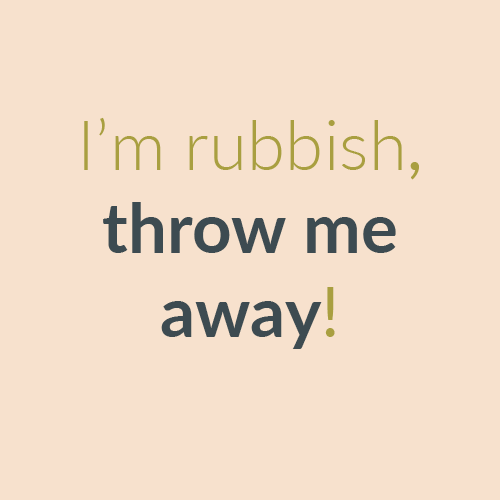
<style>
.page{position:relative;width:500px;height:500px;background:#f7e1cd}
.page>*{position:absolute;margin:0}
.t1{font:104.2px "Avenir-Black";color:#f7e2cd}
.t2{font:69.4px "Lato-Bold";color:#3d4b51}
.t3{font:69.4px "Lato-Light";color:#a9a040}
.t4{font:69.4px "Lato-Regular";color:#a9a040}
</style>
<div class="page">
<p class="t1" style="left:238px;top:87px;width:17px;height:74px">I</p>
<p class="t2" style="left:84px;top:117px;width:335px;height:232px;text-align:center"><span class="t3">I’m rubbish</span><span class="t4">, </span>throw me away<span class="t4">!</span></p>
</div>
